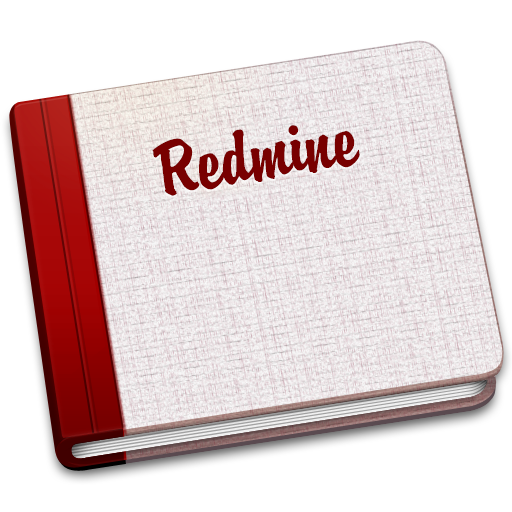
<style>
.page{position:relative;width:512px;height:512px;background:#ffffff}
.page>*{position:absolute;margin:0}
.t1{font:80px "Brody";color:#780000}
</style>
<div class="page">
<p class="t1" style="left:152px;top:125px;width:208px;height:71px;rotate:-9deg">Redmine</p>
</div>
